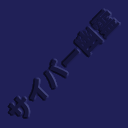
<style>
.page{position:relative;width:128px;height:128px;background:#202057}
.page>*{position:absolute;margin:0}
.t1{font:24px "NotoSansJP-Black";color:#16163a}
</style>
<div class="page">
<p class="t1" style="left:8px;top:9px;width:112px;height:109px;rotate:-45deg">サイバー幽霊</p>
</div>
